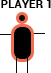
<style>
.page{position:relative;width:51px;height:73px;background:#ffffff}
.page>*{position:absolute;margin:0}
.t1{font:11px "Roboto-Bold";letter-spacing:0.025em;color:#000000}
</style>
<div class="page">
<p class="t1" style="left:1px;top:0px;width:50px;height:8px">PLAYER 1</p>
</div>
